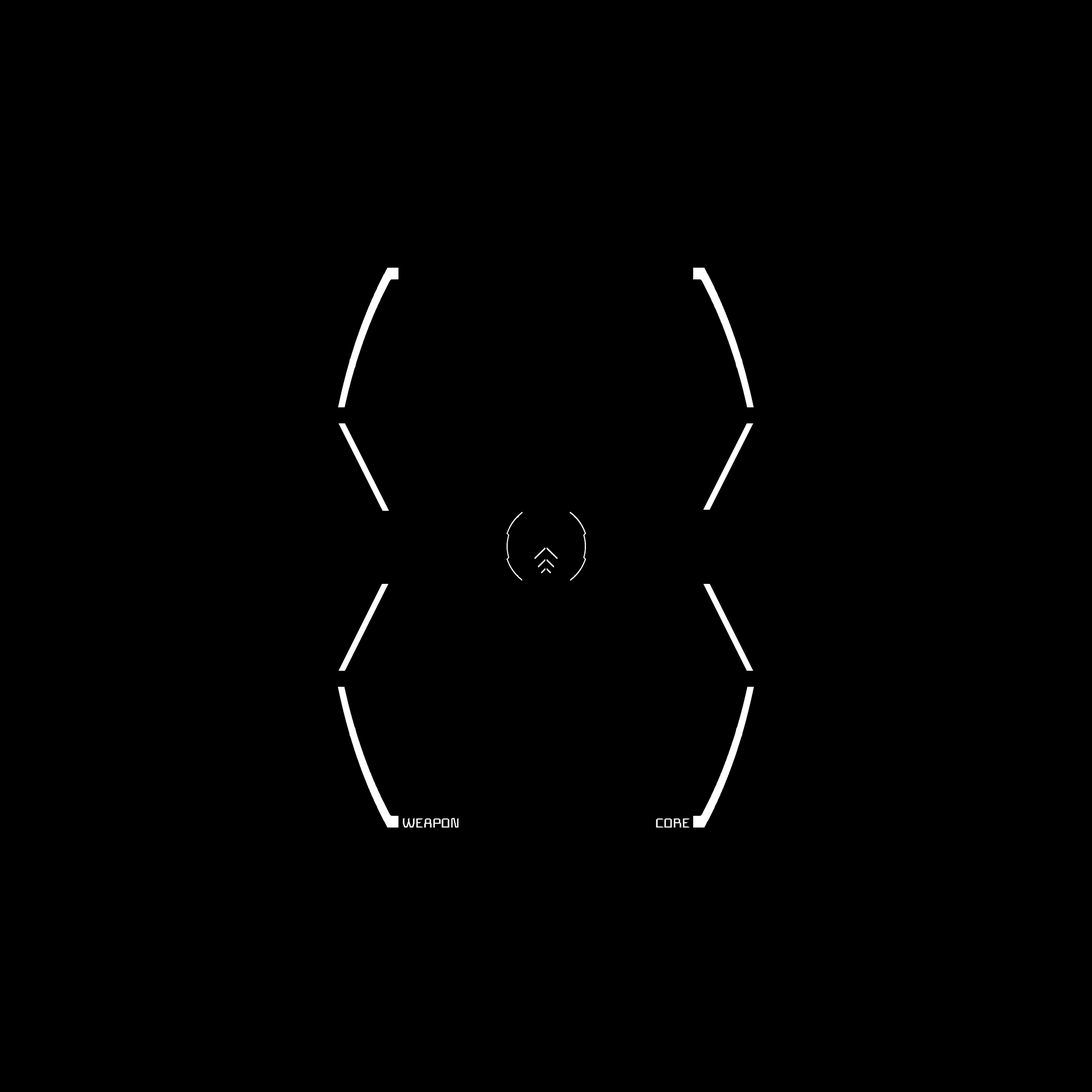
<style>
.page{position:relative;width:1092px;height:1092px;background:#000000}
.page>*{position:absolute;margin:0}
.t1{font:13.3px "SpaceEngineers";color:#ffffff}
</style>
<div class="page">
<p class="t1" style="left:403px;top:818px;width:287px;height:10px">WEAPON            CORE</p>
</div>
